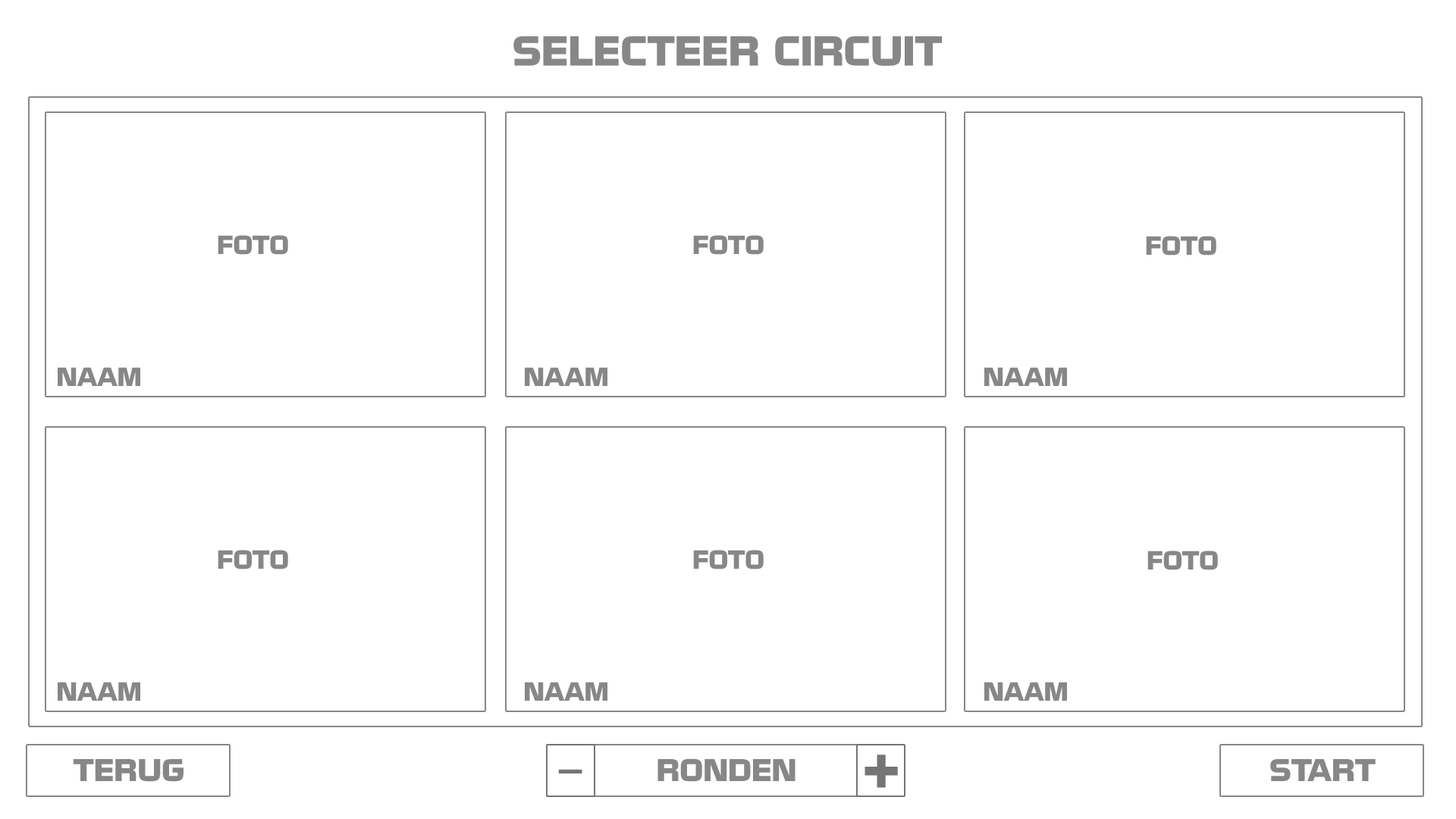
<style>
.page{position:relative;width:1456px;height:819px;background:#ffffff}
.page>*{position:absolute;margin:0}
.t1{font:36.4px "NissanOpti";color:#878787}
.t2{font:22.7px "NissanOpti";color:#878787}
.t3{font:27.3px "NissanOpti";color:#878787}
.t4{font:45.5px "NissanOpti";color:#757575}
</style>
<div class="page">
<p class="t1" style="left:513px;top:36px;width:430px;height:30px">SELECTEER CIRCUIT</p>
<p class="t2" style="left:218px;top:235px;width:70px;height:20px">FOTO</p>
<p class="t2" style="left:693px;top:235px;width:71px;height:20px">FOTO</p>
<p class="t2" style="left:1146px;top:236px;width:70px;height:20px">FOTO</p>
<p class="t2" style="left:58px;top:367px;width:82px;height:19px">NAAM</p>
<p class="t2" style="left:525px;top:367px;width:82px;height:19px">NAAM</p>
<p class="t2" style="left:984px;top:367px;width:83px;height:19px">NAAM</p>
<p class="t2" style="left:218px;top:550px;width:70px;height:20px">FOTO</p>
<p class="t2" style="left:693px;top:550px;width:71px;height:20px">FOTO</p>
<p class="t2" style="left:1147px;top:551px;width:71px;height:19px">FOTO</p>
<p class="t2" style="left:58px;top:682px;width:82px;height:19px">NAAM</p>
<p class="t2" style="left:525px;top:682px;width:82px;height:19px">NAAM</p>
<p class="t2" style="left:984px;top:682px;width:83px;height:19px">NAAM</p>
<p class="t3" style="left:73px;top:759px;width:111px;height:23px">TERUG</p>
<p class="t3" style="left:657px;top:758px;width:138px;height:24px">RONDEN</p>
<p class="t4" style="left:864px;top:755px;width:34px;height:33px">+</p>
<p class="t3" style="left:1270px;top:759px;width:106px;height:22px">START</p>
<p class="t4" style="left:558px;top:769px;width:24px;height:4px;rotate:180deg">_</p>
</div>
